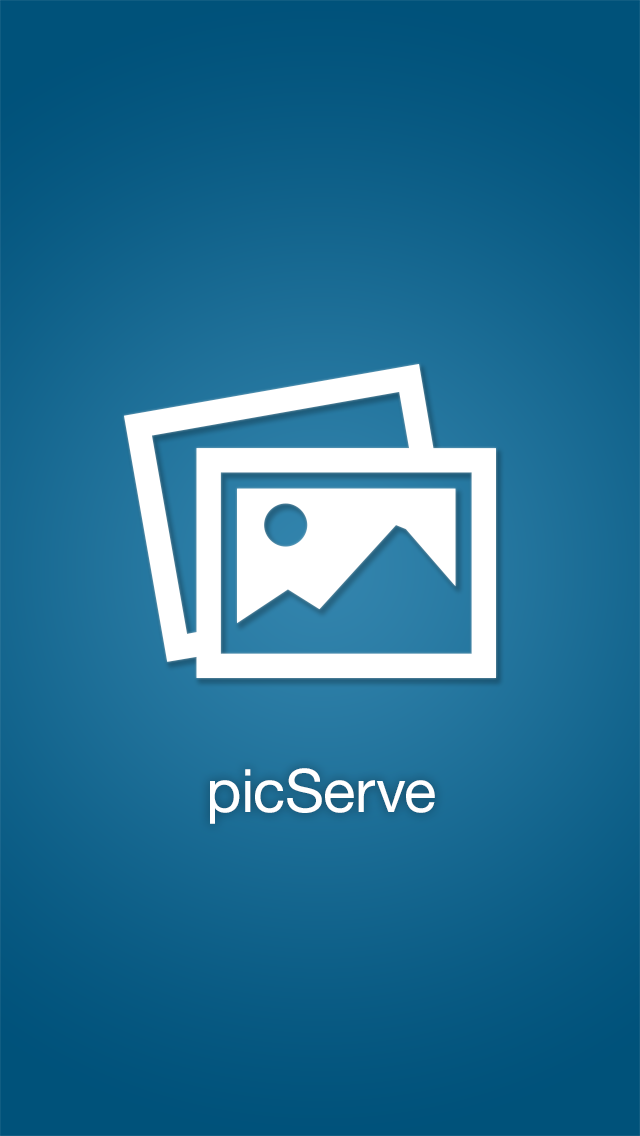
<style>
.page{position:relative;width:640px;height:1136px}
.page>*{position:absolute;margin:0}
.t1{font:60px "HelveticaNeue";color:#ffffff}
</style>
<div class="page">
<p class="t1" style="left:210px;top:768px;width:225px;height:56px">picServe</p>
</div>
